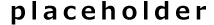
<style>
.page{position:relative;width:214px;height:25px;background:#ffffff}
.page>*{position:absolute;margin:0}
.t1{font:24px "Meiryo-Bold";letter-spacing:0.2em;color:#000000}
</style>
<div class="page">
<p class="t1" style="left:11px;top:1px;width:195px;height:24px">placeholder</p>
</div>
